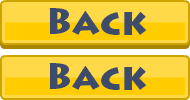
<style>
.page{position:relative;width:190px;height:100px;background:#ffd948}
.page>*{position:absolute;margin:0}
.t1{font:36px "LithosPro-Black";color:#3d4c6b}
</style>
<div class="page">
<p class="t1" style="left:49px;top:8px;width:98px;height:27px">Back</p>
<p class="t1" style="left:49px;top:63px;width:98px;height:27px">Back</p>
</div>
